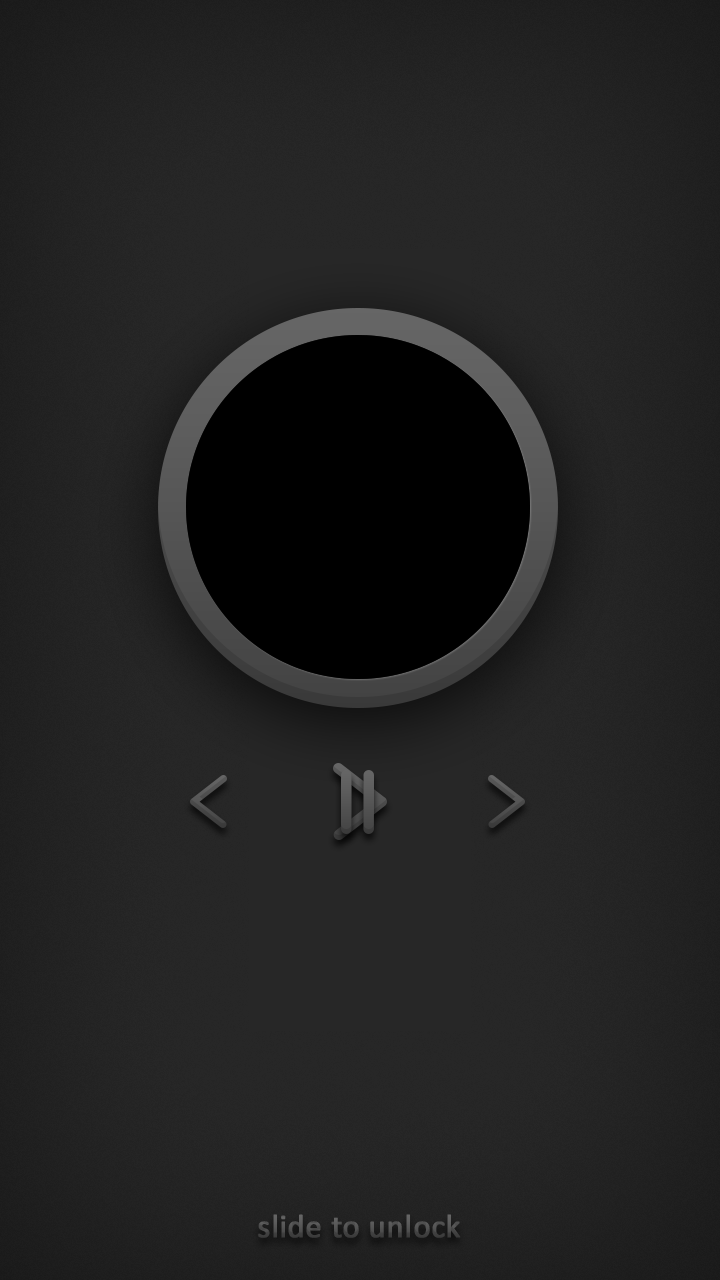
<style>
.page{position:relative;width:720px;height:1280px}
.page>*{position:absolute;margin:0}
.t1{font:32.9px "Calibri";color:#4f4f4f;font-weight:bold}
</style>
<div class="page">
<p class="t1" style="left:258px;top:1214px;width:203px;height:24px">slide to unlock</p>
</div>
